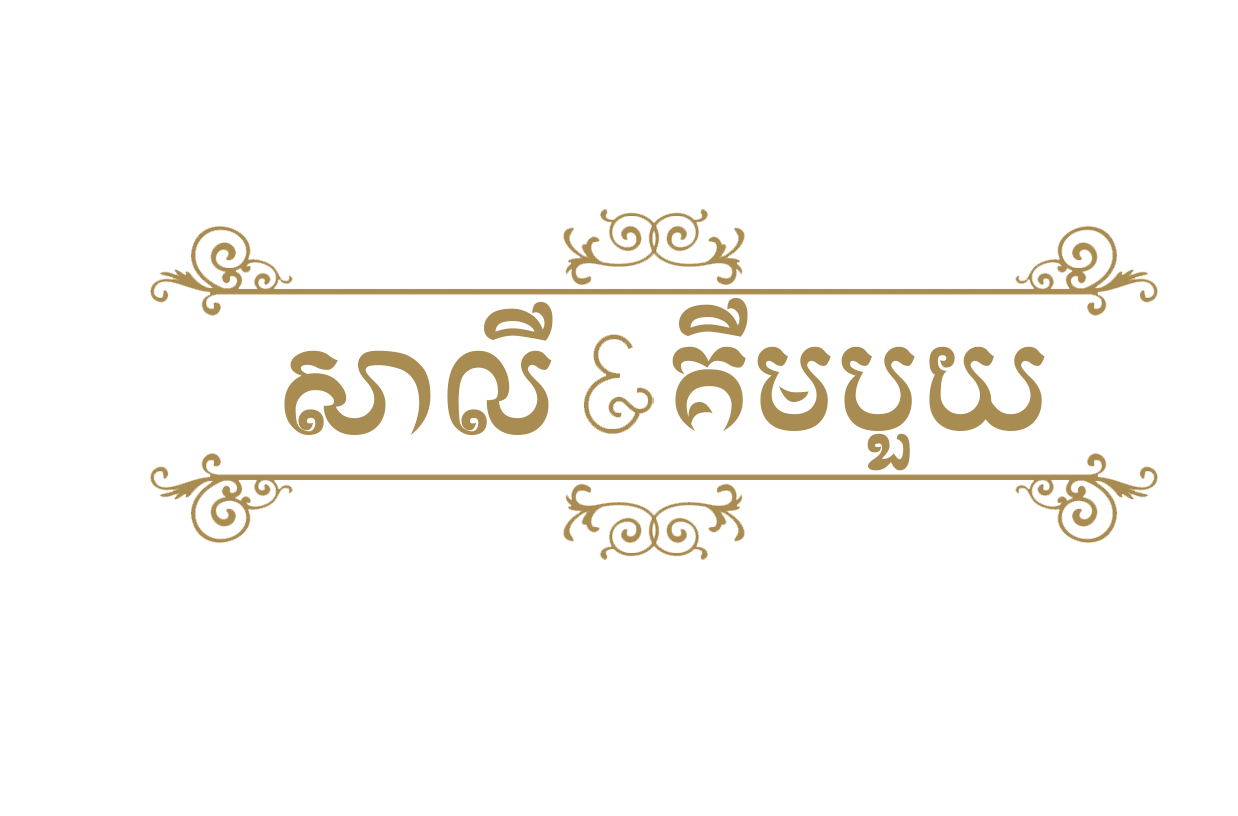
<style>
.page{position:relative;width:1238px;height:816px;background:#ffffff}
.page>*{position:absolute;margin:0}
.t1{font:115.4px "Tlok";color:#a98c51}
</style>
<div class="page">
<p class="t1" style="left:284px;top:301px;width:269px;height:134px">សាលី</p>
<p class="t1" style="left:672px;top:297px;width:373px;height:174px">គីមបួយ</p>
</div>
